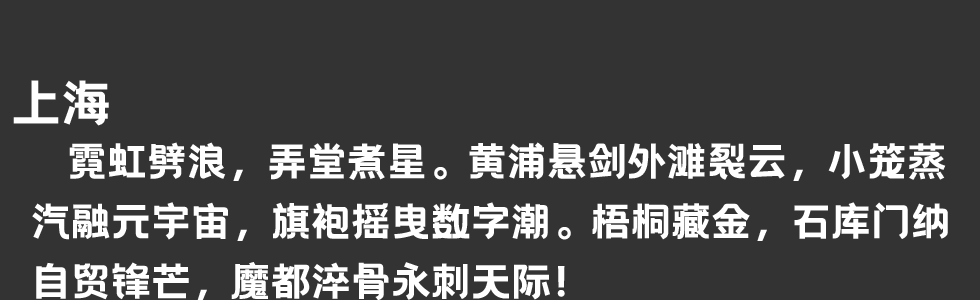
<style>
.page{position:relative;width:980px;height:300px;background:#333333}
.page>*{position:absolute;margin:0}
.t1{font:50px "HelloFont-WenYiHei";color:#ffffff}
.t2{font:40px/60px "HelloFont-WenYiHei";color:#ffffff}
</style>
<div class="page">
<p class="t1" style="left:13px;top:80px;width:96px;height:46px">上海</p>
<p class="t2" style="left:32px;top:142px;width:916px;height:159px">霓虹劈浪，弄堂煮星。黄浦悬剑外滩裂云，小笼蒸<br>汽融元宇宙，旗袍摇曳数字潮。梧桐藏金，石库门纳<br>自贸锋芒，魔都淬骨永刺天际！</p>
</div>
